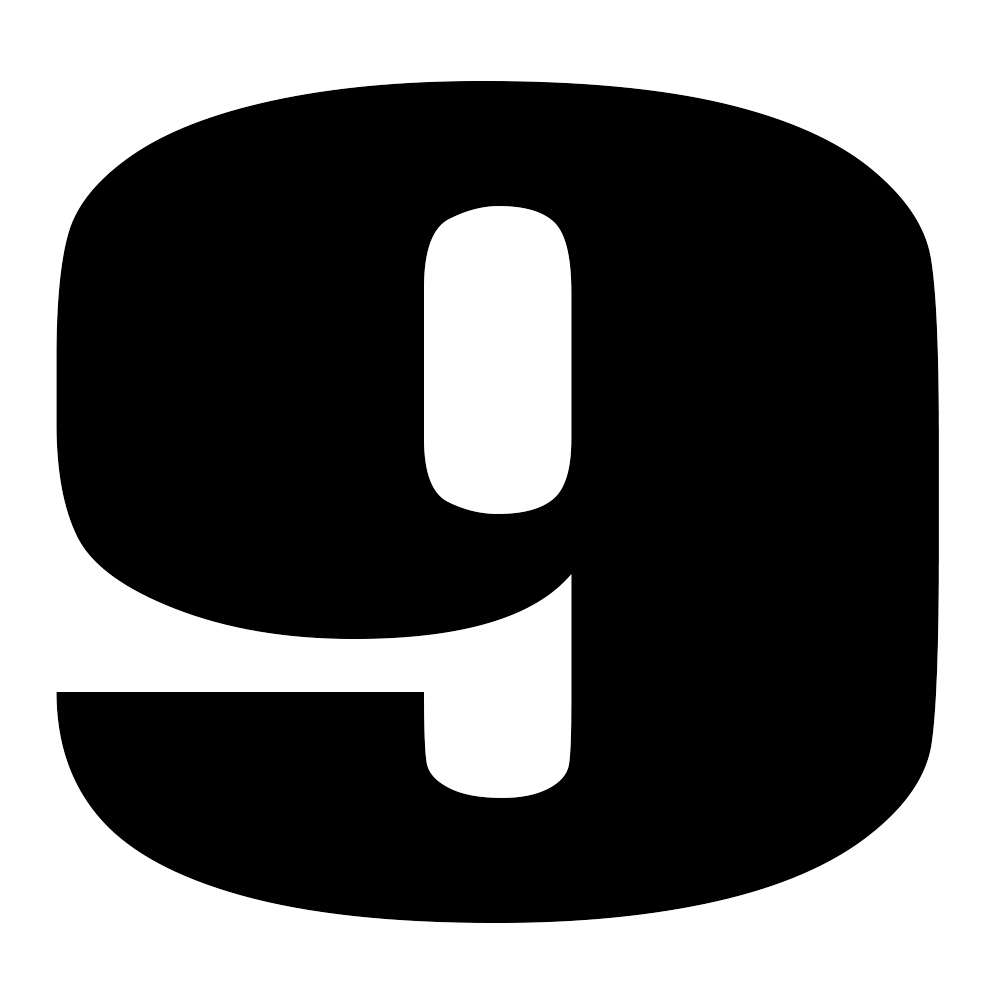
<style>
.page{position:relative;width:1000px;height:1000px;background:#000000}
.page>*{position:absolute;margin:0}
.t1{font:1024.6px "Impact";color:#000000;scale:1.82 1}
</style>
<div class="page">
<p class="t1" style="left:56px;top:81px;width:883px;height:842px">9</p>
</div>
